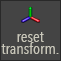
<style>
.page{position:relative;width:61px;height:61px;background:#444444}
.page>*{position:absolute;margin:0}
.t1{font:16px/12px "AvenirNextCondensed-Regular";color:#c9c7ba}
</style>
<div class="page">
<p class="t1" style="left:1px;top:32px;width:58px;height:22px;text-align:center">reset<br>transform.</p>
</div>
